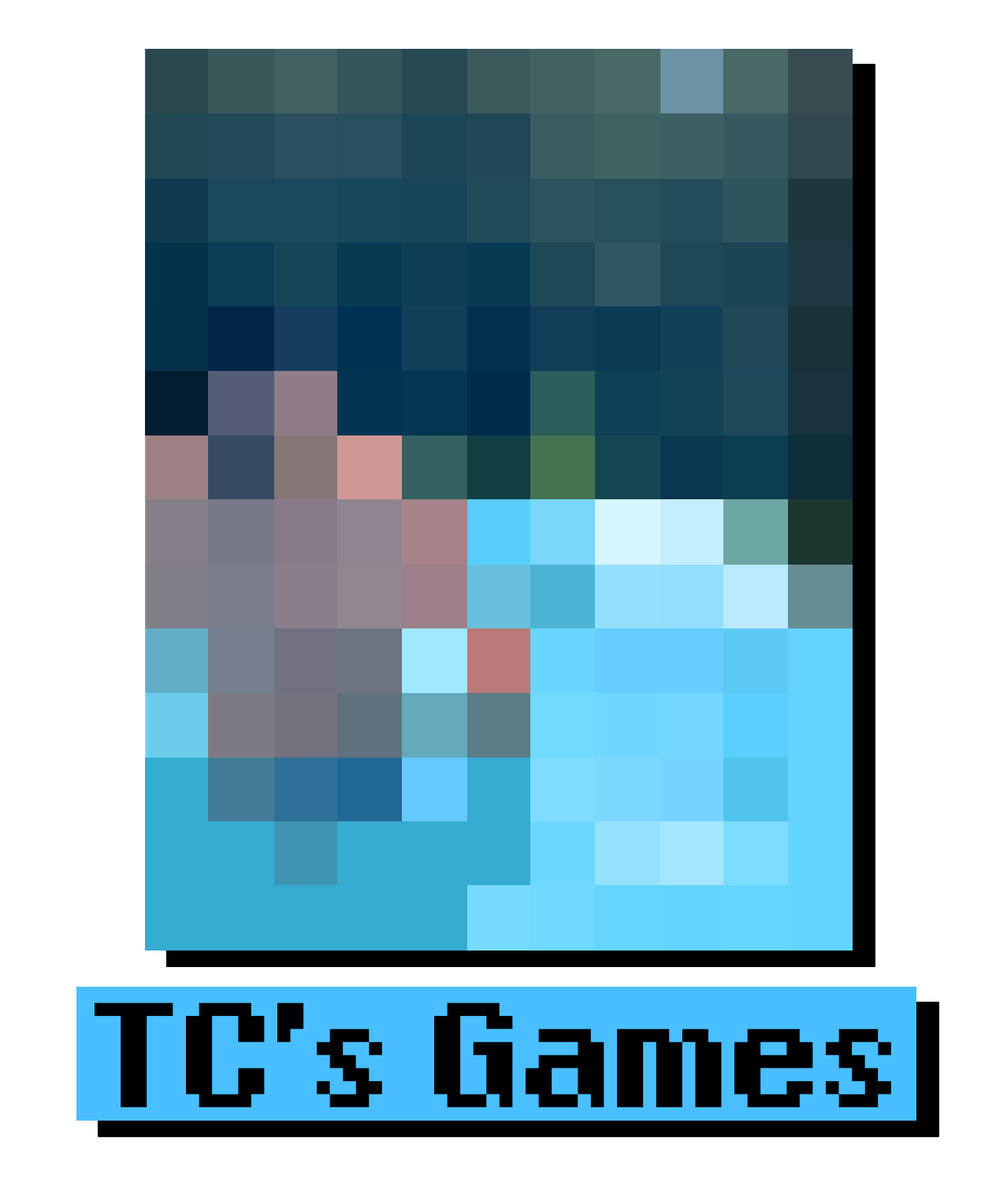
<style>
.page{position:relative;width:996px;height:1197px;background:#ffffff}
.page>*{position:absolute;margin:0}
.t1{font:208.8px "Nihonium113";color:#000000}
</style>
<div class="page">
<p class="t1" style="left:95px;top:1003px;width:796px;height:105px">TC’s Games</p>
</div>
